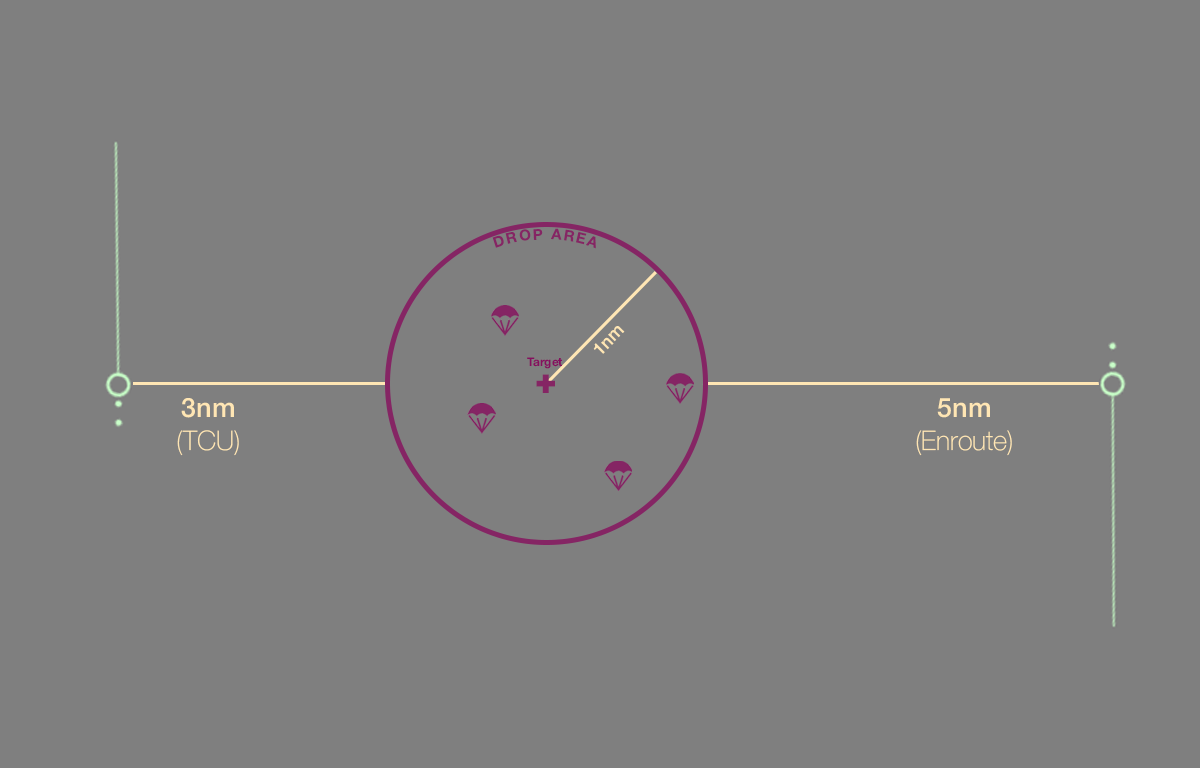
<style>
.page{position:relative;width:1200px;height:768px;background:#7f7f7f}
.page>*{position:absolute;margin:0}
.t1{font:14.9px "HelveticaNeue-Bold";letter-spacing:0.2em;color:#852564}
.t2{font:18px "HelveticaNeue-Medium";color:#ffe6b4}
.t3{font:11.9px "HelveticaNeue-Bold";color:#850f5f}
.t4{font:35.8px "HelveticaNeue-Black";letter-spacing:0.2em;color:#852564}
.t5{font:27px "HelveticaNeue-Thin";color:#ffe6b4}
.t6{font:27px "HelveticaNeue-Medium";color:#ffe6b4}
</style>
<div class="page">
<p class="t1" style="left:492px;top:228px;width:104px;height:21px">DROP AREA</p>
<p class="t2" style="left:593px;top:326px;width:32px;height:28px;rotate:-45deg">1nm</p>
<p class="t3" style="left:527px;top:357px;width:35px;height:12px">Target</p>
<p class="t4" style="left:536px;top:374px;width:19px;height:19px">+</p>
<p class="t5" style="left:177px;top:398px;width:62px;height:58px;text-align:center"><span class="t6">3nm<br></span>(TCU)</p>
<p class="t5" style="left:916px;top:398px;width:96px;height:58px;text-align:center"><span class="t6">5nm<br></span>(Enroute)</p>
</div>
